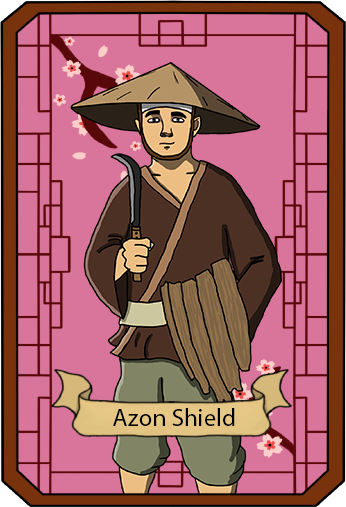
<style>
.page{position:relative;width:346px;height:507px;background:#d9749a}
.page>*{position:absolute;margin:0}
.t1{font:25px "MyriadPro-Regular";color:#000000}
</style>
<div class="page">
<p class="t1" style="left:113px;top:408px;width:122px;height:18px">Azon Shield</p>
</div>
